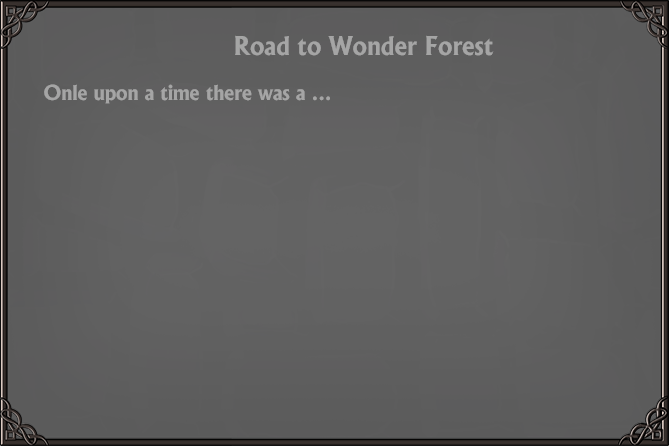
<style>
.page{position:relative;width:669px;height:446px}
.page>*{position:absolute;margin:0}
.t1{font:24.9px "AlbertusBold-Regular";color:#a5a5a5}
.t2{font:20px "AlbertusBold-Regular";color:#a5a5a5}
</style>
<div class="page">
<p class="t1" style="left:235px;top:35px;width:259px;height:21px">Road to Wonder Forest</p>
<p class="t2" style="left:44px;top:84px;width:286px;height:20px">Onle upon a time there was a ...</p>
</div>
